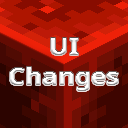
<style>
.page{position:relative;width:128px;height:128px}
.page>*{position:absolute;margin:0}
.t1{font:24px/30px "Sarasa-UI-SC-Bold";color:#ffffff;scale:1.1 1}
</style>
<div class="page">
<p class="t1" style="left:10px;top:38px;width:108px;height:53px;text-align:center">UI<br>Changes</p>
</div>
